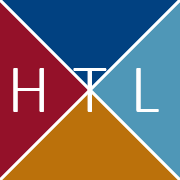
<style>
.page{position:relative;width:180px;height:180px;background:#bb710b}
.page>*{position:absolute;margin:0}
.t1{font:70px "Calibri-Light";color:#ffffff}
</style>
<div class="page">
<p class="t1" style="left:13px;top:68px;width:31px;height:44px">H</p>
<p class="t1" style="left:73px;top:68px;width:34px;height:44px">T</p>
<p class="t1" style="left:136px;top:68px;width:23px;height:44px">L</p>
</div>
